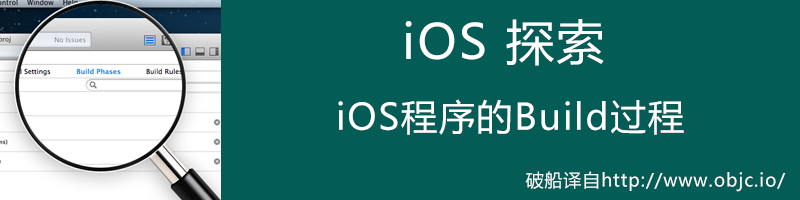
<style>
.page{position:relative;width:800px;height:200px;background:#045c56}
.page>*{position:absolute;margin:0}
.t1{font:48px "MicrosoftYaHei";letter-spacing:0.05em;color:#ffffff}
.t2{font:36px "MicrosoftYaHei";letter-spacing:0.05em;color:#ffffff}
.t3{font:18px "MicrosoftYaHei";letter-spacing:0.05em;color:#ffffff}
</style>
<div class="page">
<p class="t1" style="left:405px;top:19px;width:199px;height:47px">iOS 探索</p>
<p class="t2" style="left:338px;top:99px;width:346px;height:36px">iOS程序的Build过程</p>
<p class="t3" style="left:525px;top:171px;width:261px;height:21px">破船译自http://www.objc.io/</p>
</div>
